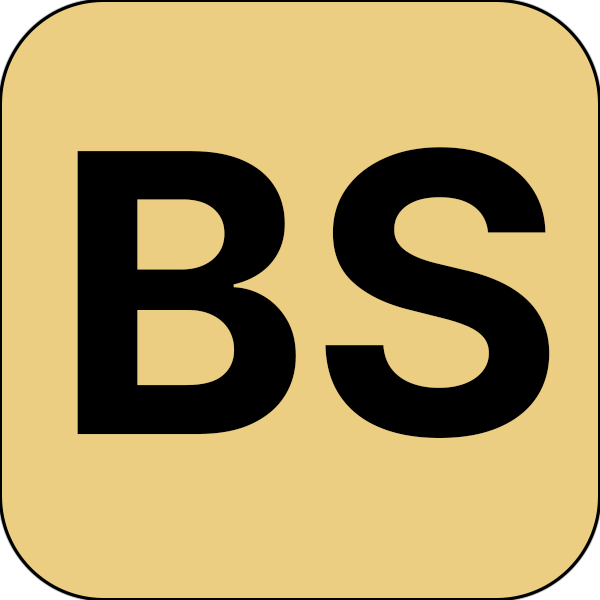
<style>
.page{position:relative;width:600px;height:600px;background:#ebce81}
.page>*{position:absolute;margin:0}
.t1{font:388.9px "Inter-Bold";color:#000000}
</style>
<div class="page">
<p class="t1" style="left:77px;top:147px;width:473px;height:291px">BS</p>
</div>
